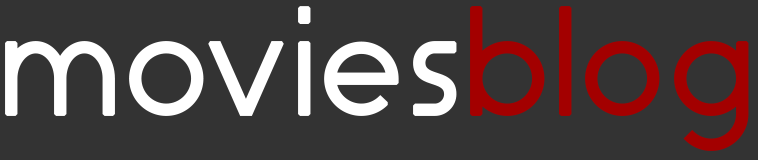
<style>
.page{position:relative;width:758px;height:160px;background:#333333}
.page>*{position:absolute;margin:0}
.t1{font:141.2px "Aspergit-Bold";color:#ffffff;font-weight:bold}
.t2{font:141.2px "Aspergit-Bold";color:#a30000;font-weight:bold}
</style>
<div class="page">
<p class="t1" style="left:5px;top:6px;width:744px;height:145px">movies<span class="t2">blog</span></p>
</div>
